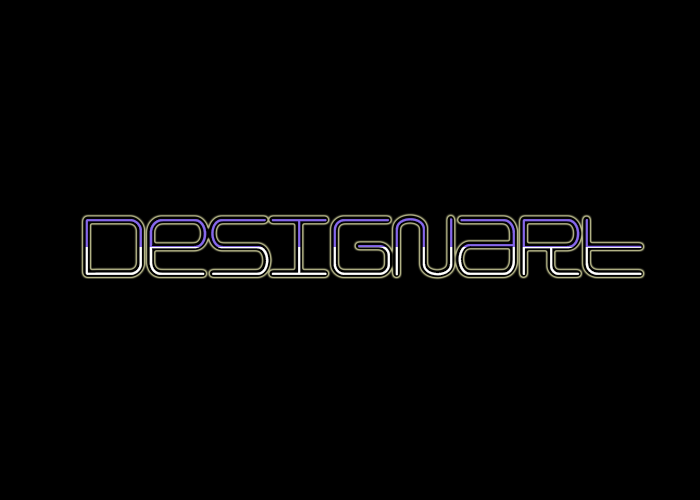
<style>
.page{position:relative;width:700px;height:500px;background:#000000}
.page>*{position:absolute;margin:0}
.t1{font:80px "Gota-Light"}
</style>
<div class="page">
<p class="t1" style="left:85px;top:218px;width:557px;height:58px">designart</p>
</div>
